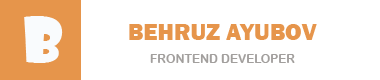
<style>
.page{position:relative;width:380px;height:80px;background:#ffffff}
.page>*{position:absolute;margin:0}
.t1{font:24px "FranklinGothic-Heavy";color:#e6954b}
.t2{font:12px "ArialRoundedMTBold";color:#a29f9d}
</style>
<div class="page">
<p class="t1" style="left:129px;top:24px;width:188px;height:16px">BEHRUZ AYUBOV</p>
<p class="t2" style="left:150px;top:54px;width:145px;height:9px">FRONTEND DEVELOPER</p>
</div>
